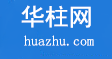
<style>
.page{position:relative;width:112px;height:59px;background:#207ada}
.page>*{position:absolute;margin:0}
.t1{font:24px "SimHei";color:#ffffff}
.t2{font:14px "SimSun";color:#ffffff}
</style>
<div class="page">
<p class="t1" style="left:21px;top:5px;width:70px;height:23px">华柱网</p>
<p class="t2" style="left:24px;top:35px;width:70px;height:11px">huazhu.com</p>
</div>
